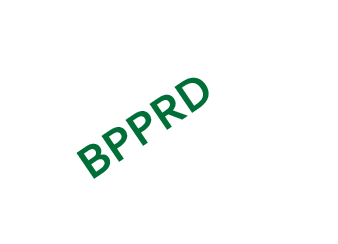
<style>
.page{position:relative;width:338px;height:244px;background:#ffffff}
.page>*{position:absolute;margin:0}
.t1{font:48px "Corbel-Bold";color:#006f37}
</style>
<div class="page">
<p class="t1" style="left:76px;top:77px;width:133px;height:102px;rotate:-34deg">BPPRD</p>
</div>
